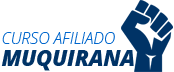
<style>
.page{position:relative;width:174px;height:72px;background:#ffffff}
.page>*{position:absolute;margin:0}
.t1{font:16px/22px "OpenSansLight-Italic";color:#0066cc;text-transform:uppercase}
.t2{font:21.5px/22px "OpenSans-ExtraboldItalic";color:#003366;text-transform:uppercase}
</style>
<div class="page">
<p class="t1" style="left:1px;top:32px;width:133px;height:39px">Curso Afiliado<br><span class="t2">Muquirana</span></p>
</div>
